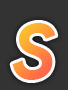
<style>
.page{position:relative;width:68px;height:90px;background:#333333}
.page>*{position:absolute;margin:0}
.t1{font:77px "ProductSans-BoldItalic";letter-spacing:-0.22em}
</style>
<div class="page">
<p class="t1" style="left:12px;top:23px;width:44px;height:57px">S</p>
</div>
